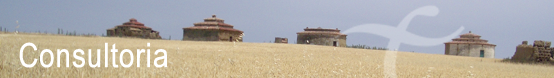
<style>
.page{position:relative;width:554px;height:78px}
.page>*{position:absolute;margin:0}
.t1{font:34px "ArialNarrow";color:#ffffff;font-weight:bold}
</style>
<div class="page">
<p class="t1" style="left:19px;top:42px;width:149px;height:26px">Consultoria</p>
</div>
